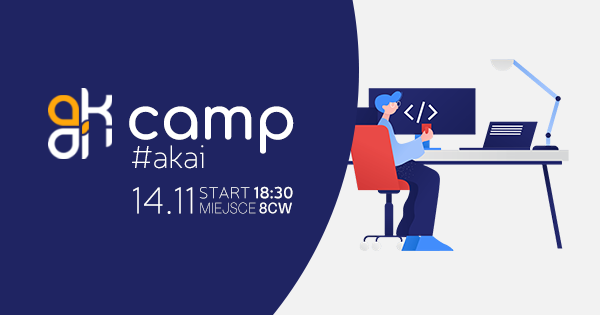
<style>
.page{position:relative;width:600px;height:315px;background:#1f2462}
.page>*{position:absolute;margin:0}
.t1{font:60px "Comfortaa-Bold";letter-spacing:-0.025em;color:#ffffff}
.t2{font:32.2px "Neris-Thin";letter-spacing:-0.025em;color:#ffffff}
.t3{font:38.1px "Neris-Thin";color:#ffffff}
.t4{font:16.2px "Neris-Thin";color:#ffffff}
.t5{font:16.2px "Neris-SemiBold";color:#ffffff}
.t6{font:15.2px "Aileron-Thin";color:#ffffff;scale:0.96 1}
.t7{font:15.2px "Aileron-SemiBold";color:#ffffff;scale:0.96 1}
</style>
<div class="page">
<p class="t1" style="left:129px;top:106px;width:165px;height:48px">camp</p>
<p class="t2" style="left:132px;top:145px;width:72px;height:24px">#akai</p>
<p class="t3" style="left:133px;top:187px;width:60px;height:27px">14.11</p>
<p class="t4" style="left:199px;top:186px;width:94px;height:13px">START <span class="t5">18:30</span></p>
<p class="t6" style="left:200px;top:202px;width:92px;height:12px">MIEJSCE <span class="t7">8CW</span></p>
</div>
